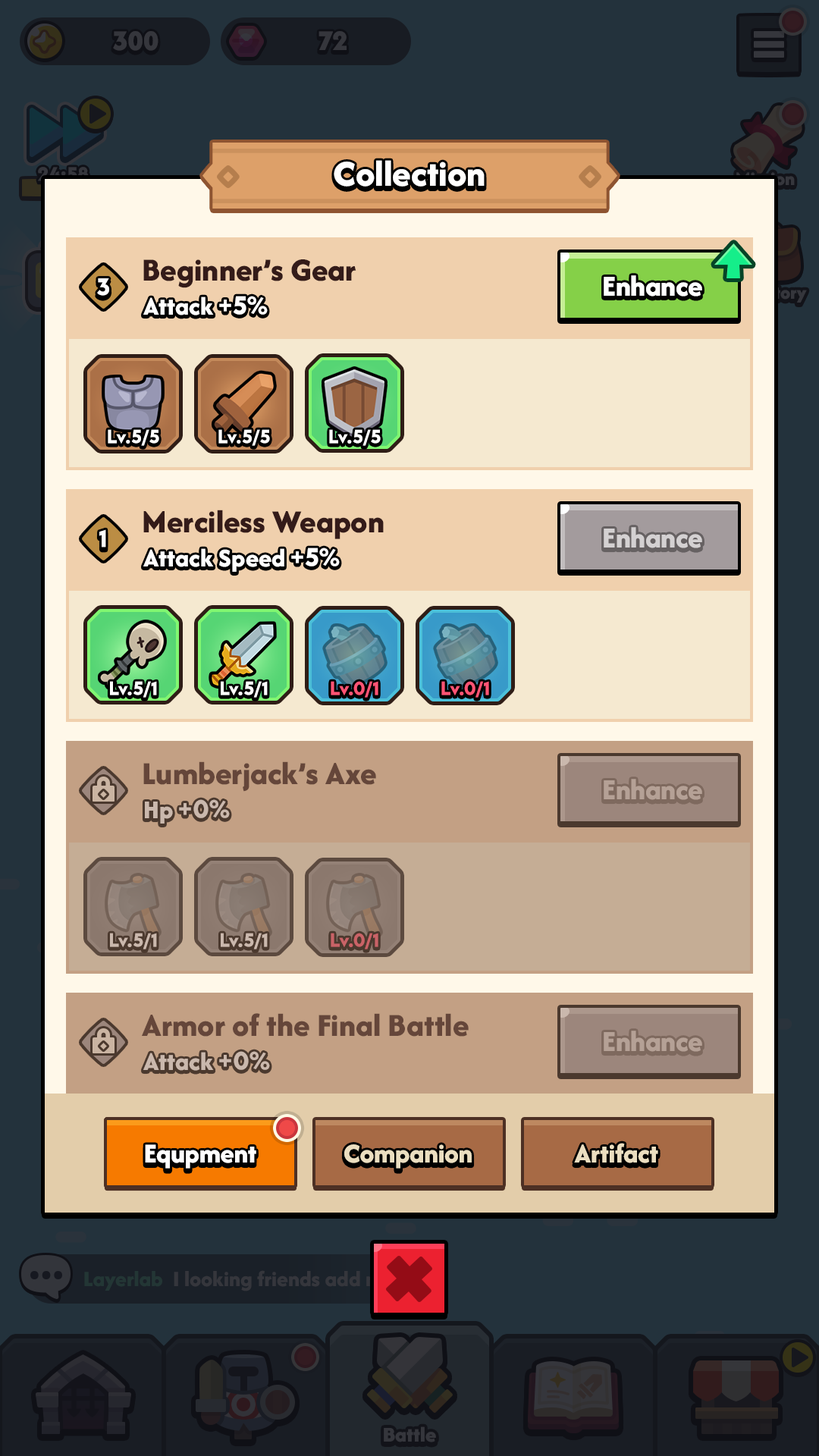
<style>
.page{position:relative;width:819px;height:1456px}
.page>*{position:absolute;margin:0}
.t1{font:37.9px "AfacadFlux-ExtraBold";color:#ffffff}
.t2{font:33.4px "AfacadFlux-ExtraBold";color:#341b19}
.t3{font:25.2px "LTAvocado-Bold";color:#ffffff;text-transform:uppercase}
.t4{font:30.3px "AfacadFlux-ExtraBold";color:#ffffff}
.t5{font:26.5px "AfacadFlux-ExtraBold";color:#ffffff}
.t6{font:26.5px "LTAvocado-Bold";color:#ffffff}
.t7{font:19.7px "LTAvocado-Bold";color:#ffffff}
.t8{font:30.3px "AfacadFlux-ExtraBold";color:#d4d1d2}
.t9{font:19.7px "LTAvocado-Bold";color:#ff5474}
.t10{font:33.4px "AfacadFlux-ExtraBold";color:#65463a}
.t11{font:30.3px "AfacadFlux-ExtraBold";color:#b5a196}
.t12{font:26.5px "LTAvocado-Bold";color:#cab8ad}
.t13{font:26.5px "AfacadFlux-ExtraBold";color:#cab8ad}
.t14{font:19.7px "LTAvocado-Bold";color:#cab8ad}
.t15{font:19.7px "LTAvocado-Bold";color:#ca6367}
.t16{font:28.4px "AfacadFlux-ExtraBold";color:#ffffff}
.t17{font:28.4px "AfacadFlux-ExtraBold";color:#ebdec0}
</style>
<div class="page">
<p class="t1" style="left:334px;top:160px;width:151px;height:27px">Collection</p>
<p class="t2" style="left:143px;top:259px;width:213px;height:29px">Beginner’s Gear</p>
<p class="t3" style="left:97px;top:278px;width:12px;height:18px">3</p>
<p class="t4" style="left:604px;top:275px;width:98px;height:22px">Enhance</p>
<p class="t5" style="left:143px;top:296px;width:125px;height:19px">Attack <span class="t6">+5%</span></p>
<p class="t7" style="left:108px;top:429px;width:51px;height:17px">Lv.5/5</p>
<p class="t7" style="left:218px;top:429px;width:52px;height:17px">Lv.5/5</p>
<p class="t7" style="left:329px;top:429px;width:52px;height:17px">Lv.5/5</p>
<p class="t2" style="left:143px;top:510px;width:241px;height:29px">Merciless Weapon</p>
<p class="t3" style="left:99px;top:529px;width:7px;height:19px">1</p>
<p class="t8" style="left:604px;top:527px;width:98px;height:21px">Enhance</p>
<p class="t5" style="left:143px;top:548px;width:197px;height:24px">Attack Speed <span class="t6">+5%</span></p>
<p class="t7" style="left:110px;top:681px;width:47px;height:17px">Lv.5/1</p>
<p class="t7" style="left:221px;top:681px;width:47px;height:17px">Lv.5/1</p>
<p class="t9" style="left:331px;top:681px;width:47px;height:17px">Lv.0/1</p>
<p class="t9" style="left:441px;top:681px;width:48px;height:17px">Lv.0/1</p>
<p class="t10" style="left:143px;top:761px;width:233px;height:31px">Lumberjack’s Axe</p>
<p class="t11" style="left:604px;top:779px;width:98px;height:21px">Enhance</p>
<p class="t12" style="left:145px;top:799px;width:85px;height:25px"><span class="t13">Hp </span>+0%</p>
<p class="t14" style="left:110px;top:933px;width:47px;height:16px">Lv.5/1</p>
<p class="t14" style="left:221px;top:933px;width:47px;height:16px">Lv.5/1</p>
<p class="t15" style="left:331px;top:933px;width:47px;height:16px">Lv.0/1</p>
<p class="t10" style="left:142px;top:1013px;width:327px;height:24px">Armor of the Final Battle</p>
<p class="t11" style="left:604px;top:1031px;width:98px;height:21px">Enhance</p>
<p class="t13" style="left:143px;top:1051px;width:127px;height:20px">Attack <span class="t12">+0%</span></p>
<p class="t16" style="left:145px;top:1144px;width:111px;height:25px">Equpment</p>
<p class="t16" style="left:145px;top:1144px;width:111px;height:25px">Equpment</p>
<p class="t17" style="left:344px;top:1144px;width:128px;height:25px">Companion</p>
<p class="t17" style="left:574px;top:1143px;width:84px;height:20px">Artifact</p>
</div>
